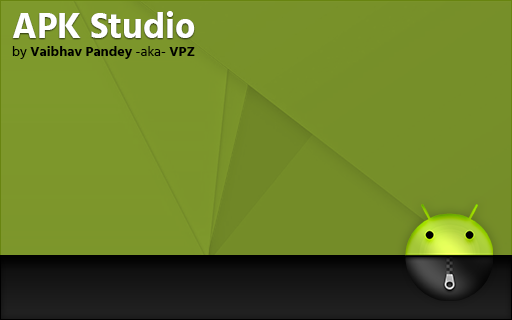
<style>
.page{position:relative;width:512px;height:320px}
.page>*{position:absolute;margin:0}
.t1{font:36px "Hind-Bold";color:#ffffff}
.t2{font:14px "Hind-Bold";color:#000000}
.t3{font:14px "Hind-Regular";color:#000000}
</style>
<div class="page">
<p class="t1" style="left:12px;top:11px;width:183px;height:27px">APK Studio</p>
<p class="t2" style="left:12px;top:46px;width:183px;height:13px"><span class="t3">by </span>Vaibhav Pandey<span class="t3"> -aka- </span>VPZ</p>
</div>
